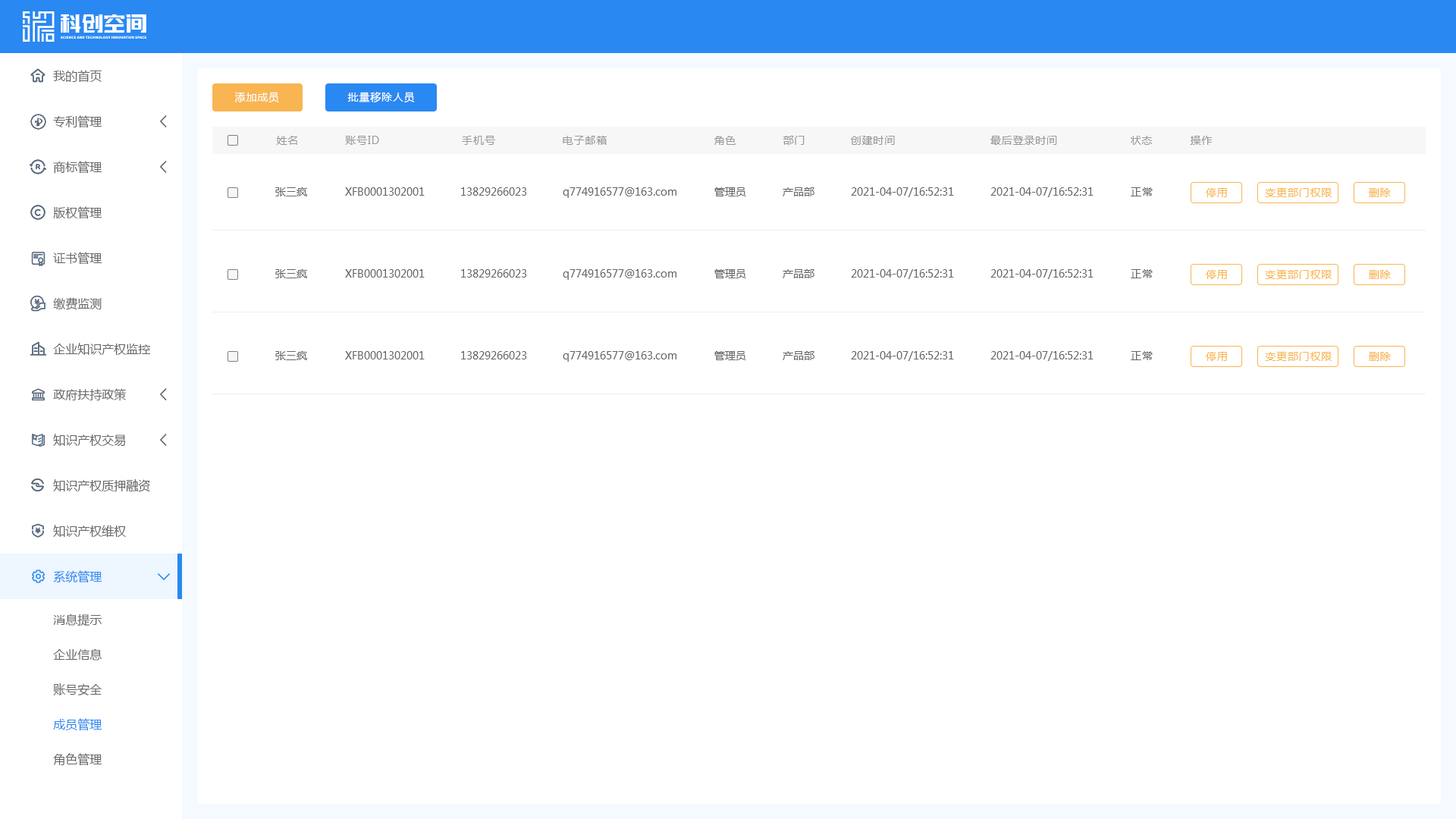
<style>
.page{position:relative;width:1456px;height:819px;background:#ffffff}
.page>*{position:absolute;margin:0}
.t1{font:12.1px "MicrosoftYaHei";color:#666666}
.t2{font:10.6px "MicrosoftYaHei";letter-spacing:0.06em;color:#ffffff}
.t3{font:10.6px "MicrosoftYaHei";letter-spacing:0.06em;color:#999999}
.t4{font:10.6px "MicrosoftYaHei";color:#666666}
.t5{font:10.6px "MicrosoftYaHei";letter-spacing:0.06em;color:#666666}
.t6{font:10.6px "MicrosoftYaHei";letter-spacing:0.06em;color:#f8b551}
.t7{font:12.1px "MicrosoftYaHei";color:#2988f2}
</style>
<div class="page">
<p class="t1" style="left:53px;top:70px;width:49px;height:13px">我的首页</p>
<p class="t2" style="left:234px;top:92px;width:45px;height:11px">添加成员</p>
<p class="t2" style="left:347px;top:92px;width:68px;height:11px">批量移除人员</p>
<p class="t1" style="left:53px;top:115px;width:49px;height:13px">专利管理</p>
<p class="t3" style="left:276px;top:136px;width:21px;height:9px">姓名</p>
<p class="t3" style="left:345px;top:136px;width:34px;height:9px">账号ID</p>
<p class="t3" style="left:462px;top:136px;width:33px;height:9px">手机号</p>
<p class="t3" style="left:563px;top:136px;width:44px;height:9px">电子邮箱</p>
<p class="t3" style="left:714px;top:136px;width:22px;height:9px">角色</p>
<p class="t3" style="left:783px;top:136px;width:22px;height:9px">部门</p>
<p class="t3" style="left:851px;top:136px;width:44px;height:9px">创建时间</p>
<p class="t3" style="left:990px;top:136px;width:67px;height:9px">最后登录时间</p>
<p class="t3" style="left:1131px;top:136px;width:21px;height:9px">状态</p>
<p class="t3" style="left:1190px;top:136px;width:23px;height:9px">操作</p>
<p class="t1" style="left:53px;top:161px;width:49px;height:13px">商标管理</p>
<p class="t4" style="left:275px;top:187px;width:32px;height:9px">张三疯</p>
<p class="t4" style="left:345px;top:187px;width:80px;height:9px">XFB0001302001</p>
<p class="t4" style="left:461px;top:187px;width:66px;height:9px">13829266023</p>
<p class="t4" style="left:563px;top:187px;width:113px;height:11px">q774916577@163.com</p>
<p class="t4" style="left:714px;top:187px;width:32px;height:9px">管理员</p>
<p class="t4" style="left:783px;top:187px;width:31px;height:9px">产品部</p>
<p class="t4" style="left:851px;top:187px;width:103px;height:10px">2021-04-07/16:52:31</p>
<p class="t4" style="left:990px;top:187px;width:104px;height:10px">2021-04-07/16:52:31</p>
<p class="t5" style="left:1131px;top:187px;width:22px;height:9px">正常</p>
<p class="t6" style="left:1206px;top:188px;width:21px;height:9px">停用</p>
<p class="t6" style="left:1265px;top:188px;width:67px;height:9px">变更部门权限</p>
<p class="t6" style="left:1369px;top:188px;width:22px;height:9px">删除</p>
<p class="t1" style="left:53px;top:206px;width:49px;height:13px">版权管理</p>
<p class="t1" style="left:53px;top:252px;width:49px;height:13px">证书管理</p>
<p class="t4" style="left:275px;top:269px;width:32px;height:9px">张三疯</p>
<p class="t4" style="left:345px;top:269px;width:80px;height:9px">XFB0001302001</p>
<p class="t4" style="left:461px;top:269px;width:66px;height:9px">13829266023</p>
<p class="t4" style="left:563px;top:269px;width:113px;height:11px">q774916577@163.com</p>
<p class="t4" style="left:714px;top:269px;width:32px;height:9px">管理员</p>
<p class="t4" style="left:783px;top:269px;width:31px;height:9px">产品部</p>
<p class="t4" style="left:851px;top:269px;width:103px;height:10px">2021-04-07/16:52:31</p>
<p class="t4" style="left:990px;top:269px;width:104px;height:10px">2021-04-07/16:52:31</p>
<p class="t5" style="left:1131px;top:269px;width:22px;height:9px">正常</p>
<p class="t6" style="left:1206px;top:270px;width:21px;height:9px">停用</p>
<p class="t6" style="left:1265px;top:270px;width:67px;height:9px">变更部门权限</p>
<p class="t6" style="left:1369px;top:270px;width:22px;height:9px">删除</p>
<p class="t1" style="left:53px;top:297px;width:49px;height:13px">缴费监测</p>
<p class="t1" style="left:53px;top:343px;width:98px;height:12px">企业知识产权监控</p>
<p class="t4" style="left:275px;top:351px;width:32px;height:9px">张三疯</p>
<p class="t4" style="left:345px;top:351px;width:80px;height:8px">XFB0001302001</p>
<p class="t4" style="left:461px;top:351px;width:66px;height:8px">13829266023</p>
<p class="t4" style="left:563px;top:351px;width:113px;height:11px">q774916577@163.com</p>
<p class="t4" style="left:714px;top:351px;width:32px;height:9px">管理员</p>
<p class="t4" style="left:783px;top:351px;width:31px;height:9px">产品部</p>
<p class="t4" style="left:851px;top:351px;width:103px;height:10px">2021-04-07/16:52:31</p>
<p class="t4" style="left:990px;top:351px;width:104px;height:10px">2021-04-07/16:52:31</p>
<p class="t5" style="left:1131px;top:351px;width:22px;height:9px">正常</p>
<p class="t6" style="left:1206px;top:352px;width:21px;height:9px">停用</p>
<p class="t6" style="left:1265px;top:352px;width:67px;height:9px">变更部门权限</p>
<p class="t6" style="left:1369px;top:352px;width:22px;height:9px">删除</p>
<p class="t1" style="left:53px;top:388px;width:73px;height:13px">政府扶持政策</p>
<p class="t1" style="left:53px;top:434px;width:73px;height:13px">知识产权交易</p>
<p class="t1" style="left:53px;top:479px;width:97px;height:13px">知识产权质押融资</p>
<p class="t1" style="left:53px;top:525px;width:74px;height:13px">知识产权维权</p>
<p class="t7" style="left:53px;top:570px;width:49px;height:13px">系统管理</p>
<p class="t1" style="left:53px;top:613px;width:49px;height:13px">消息提示</p>
<p class="t1" style="left:53px;top:648px;width:49px;height:12px">企业信息</p>
<p class="t1" style="left:53px;top:683px;width:49px;height:12px">账号安全</p>
<p class="t7" style="left:53px;top:718px;width:49px;height:13px">成员管理</p>
<p class="t1" style="left:53px;top:753px;width:49px;height:13px">角色管理</p>
</div>
